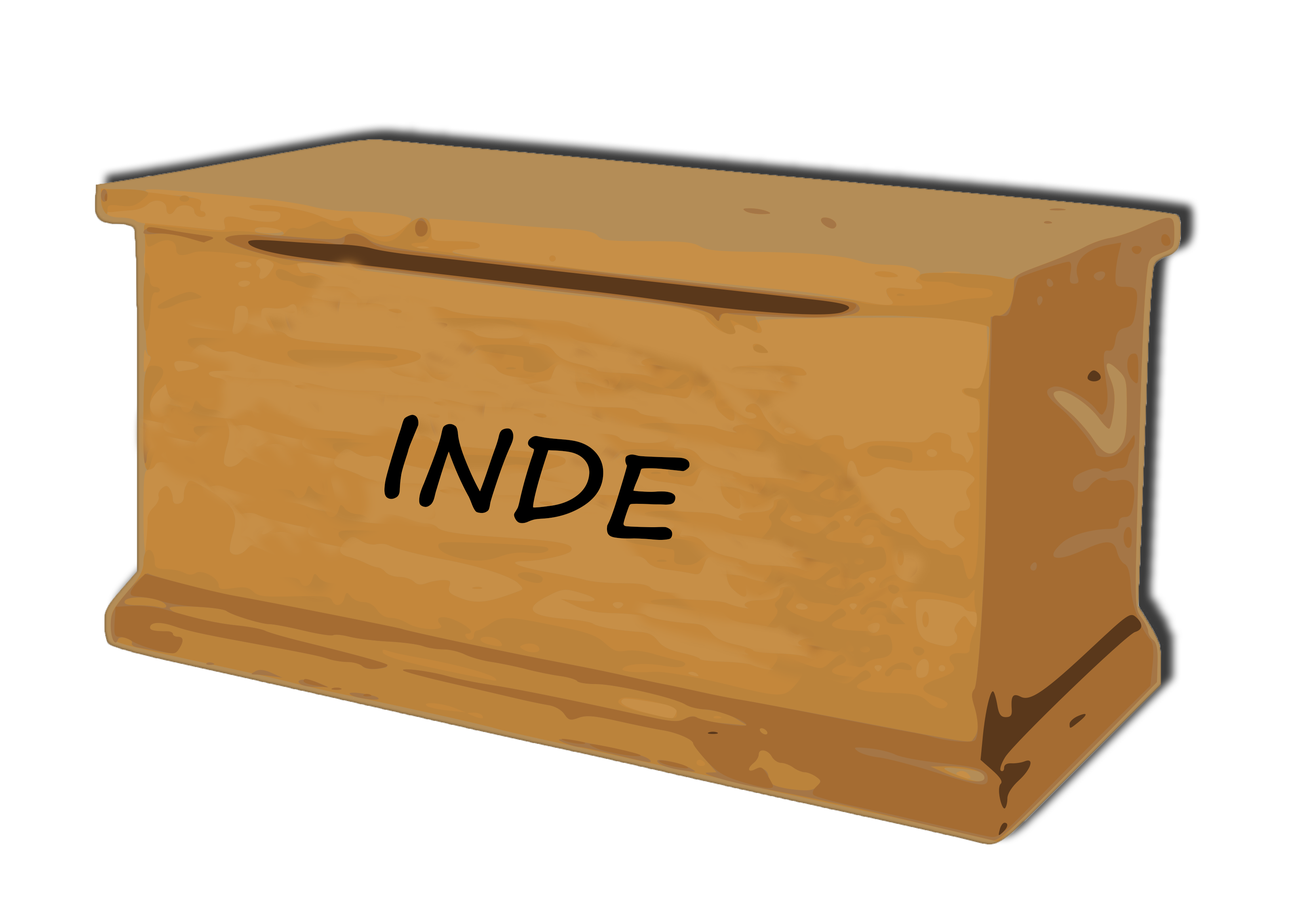
<style>
.page{position:relative;width:1309px;height:911px;background:#ffffff}
.page>*{position:absolute;margin:0}
.t1{font:118.8px "SegoePrint-Bold";color:#000000}
</style>
<div class="page">
<p class="t1" style="left:385px;top:415px;width:305px;height:125px;rotate:9deg">INDE</p>
</div>
